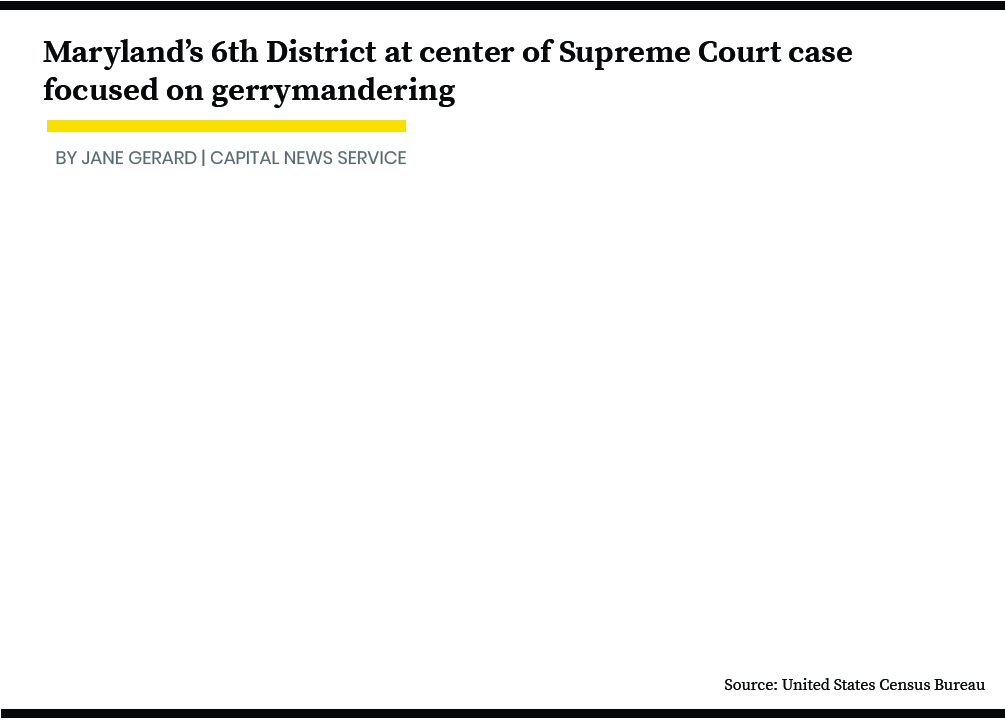
<style>
.page{position:relative;width:1005px;height:720px;background:#ffffff}
.page>*{position:absolute;margin:0}
.t1{font:32px "SourceSerifPro-Bold";color:#070809}
.t2{font:18px "Poppins-Regular";color:#586c71}
.t3{font:16px "SourceSerifPro-Regular";color:#070809}
</style>
<div class="page">
<p class="t1" style="left:43px;top:39px;width:809px;height:69px">Maryland’s 6th District at center of Supreme Court case<br>focused on gerrymandering</p>
<p class="t2" style="left:56px;top:149px;width:350px;height:18px">BY JANE GERARD | CAPITAL NEWS SERVICE</p>
<p class="t3" style="left:725px;top:678px;width:260px;height:12px">Source: United States Census Bureau</p>
</div>
